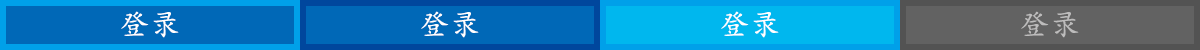
<style>
.page{position:relative;width:1200px;height:50px;background:#0068b7}
.page>*{position:absolute;margin:0}
.t1{font:30px "KaiTi";color:#ffffff}
.t2{font:30px "KaiTi";color:#bdbcbc}
</style>
<div class="page">
<p class="t1" style="left:121px;top:11px;width:58px;height:27px">登录</p>
<p class="t1" style="left:421px;top:11px;width:58px;height:27px">登录</p>
<p class="t1" style="left:721px;top:11px;width:58px;height:27px">登录</p>
<p class="t2" style="left:1021px;top:11px;width:58px;height:27px">登录</p>
</div>
